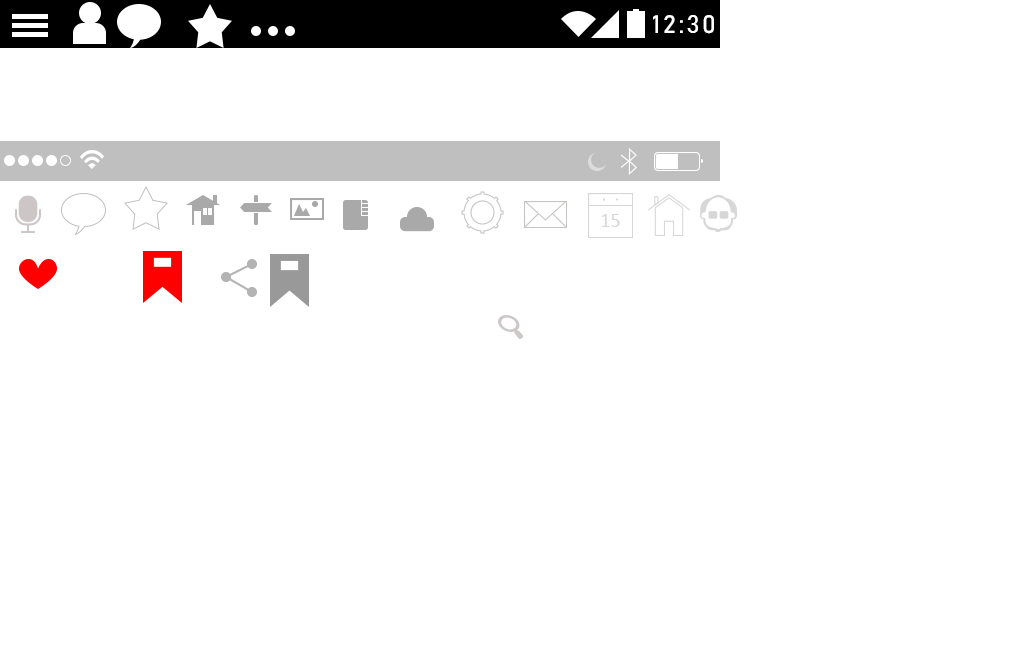
<style>
.page{position:relative;width:1021px;height:654px;background:#ffffff}
.page>*{position:absolute;margin:0}
.t1{font:25px "Bahnschrift";letter-spacing:0.1em;color:#ffffff}
</style>
<div class="page">
<p class="t1" style="left:653px;top:15px;width:61px;height:19px">12:30</p>
</div>
